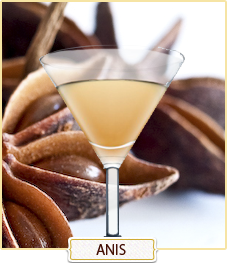
<style>
.page{position:relative;width:227px;height:263px}
.page>*{position:absolute;margin:0}
.t1{font:14px "KozGoPro-Regular";color:#441106}
</style>
<div class="page">
<p class="t1" style="left:96px;top:244px;width:30px;height:11px">ANIS</p>
</div>
